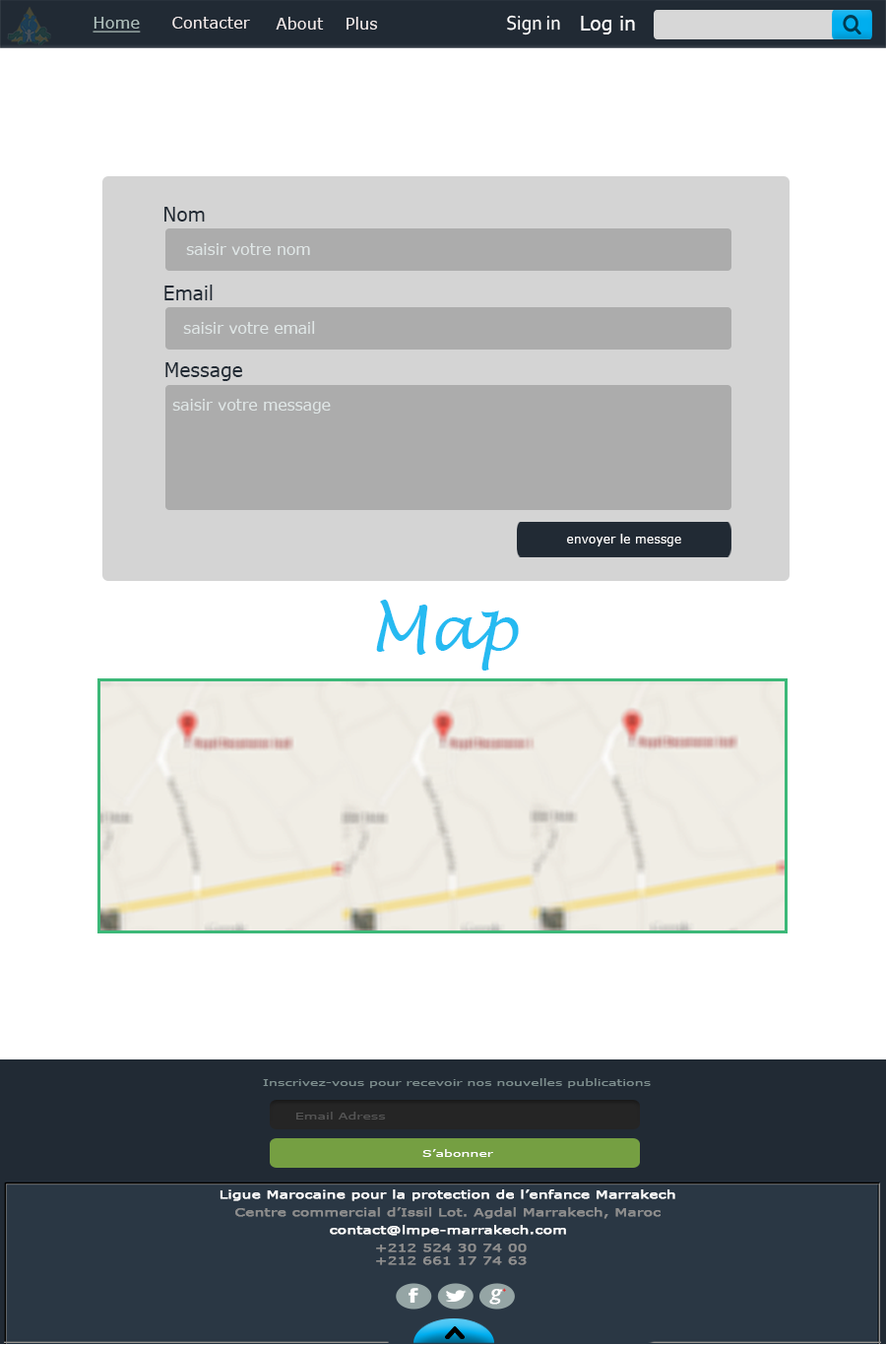
<style>
.page{position:relative;width:886px;height:1345px;background:#ffffff}
.page>*{position:absolute;margin:0}
.t1{font:17px "Verdana";color:#afc0bd;text-decoration:underline;scale:0.94 1}
.t2{font:17px "Verdana";color:#f2eaea;scale:0.94 1}
.t3{font:20.7px "Corbel";color:#fdfdfd;scale:0.94 1}
.t4{font:19.6px "Verdana";color:#ffffff;scale:0.94 1}
.t5{font:19.4px "Verdana";color:#212a34;scale:0.95 1}
.t6{font:16.2px "Verdana";color:#dfe6e6;scale:0.95 1}
.t7{font:12.9px "Verdana";color:#ffffff;scale:0.95 1}
.t8{font:62.2px "LucidaHandwriting-Italic";color:#26baf1}
.t9{font:10.1px "Verdana";color:#7d8e8e;scale:1.38 1}
.t10{font:10.1px "Verdana";color:#545454;scale:1.38 1}
.t11{font:10.1px "Verdana";color:#ffffff;scale:1.38 1}
.t12{font:10.8px "Verdana";color:#ffffff;font-weight:bold;scale:1.37 1}
.t13{font:10.8px "Verdana";color:#8e8e8e;font-weight:bold;scale:1.37 1}
.t14{font:27.7px "Vijaya";color:#ffffff;font-weight:bold}
.t15{font:6.9px "Vijaya";color:#e22727;font-weight:bold}
</style>
<div class="page">
<p class="t1" style="left:93px;top:17px;width:48px;height:16px">Home</p>
<p class="t2" style="left:172px;top:17px;width:78px;height:12px">Contacter</p>
<p class="t2" style="left:276px;top:17px;width:48px;height:13px">About</p>
<p class="t2" style="left:347px;top:17px;width:30px;height:13px">Plus</p>
<p class="t3" style="left:507px;top:15px;width:53px;height:20px">Sign in</p>
<p class="t4" style="left:581px;top:16px;width:54px;height:18px">Log in</p>
<p class="t5" style="left:164px;top:207px;width:41px;height:15px">Nom</p>
<p class="t6" style="left:186px;top:243px;width:124px;height:12px">saisir votre nom</p>
<p class="t5" style="left:164px;top:285px;width:49px;height:15px">Email</p>
<p class="t6" style="left:183px;top:321px;width:132px;height:13px">saisir votre email</p>
<p class="t5" style="left:165px;top:362px;width:77px;height:19px">Message</p>
<p class="t6" style="left:172px;top:399px;width:159px;height:15px">saisir votre message</p>
<p class="t7" style="left:567px;top:534px;width:115px;height:13px">envoyer le messge</p>
<p class="t8" style="left:376px;top:600px;width:143px;height:71px">Map</p>
<p class="t9" style="left:263px;top:1078px;width:388px;height:10px">Inscrivez-vous pour recevoir nos nouvelles publications</p>
<p class="t10" style="left:296px;top:1112px;width:90px;height:8px">Email Adress</p>
<p class="t11" style="left:423px;top:1149px;width:70px;height:8px">S’abonner</p>
<p class="t12" style="left:220px;top:1190px;width:456px;height:12px">Ligue Marocaine pour la protection de l’enfance Marrakech</p>
<p class="t13" style="left:235px;top:1207px;width:426px;height:12px">Centre commercial d’Issil Lot. Agdal Marrakech, Maroc</p>
<p class="t12" style="left:330px;top:1225px;width:236px;height:12px">contact@lmpe-marrakech.com</p>
<p class="t13" style="left:376px;top:1244px;width:151px;height:22px">+212 524 30 74 00  <br>+212 661 17 74 63</p>
<p class="t14" style="left:489px;top:1288px;width:17px;height:17px">g<span class="t15">+</span></p>
</div>
